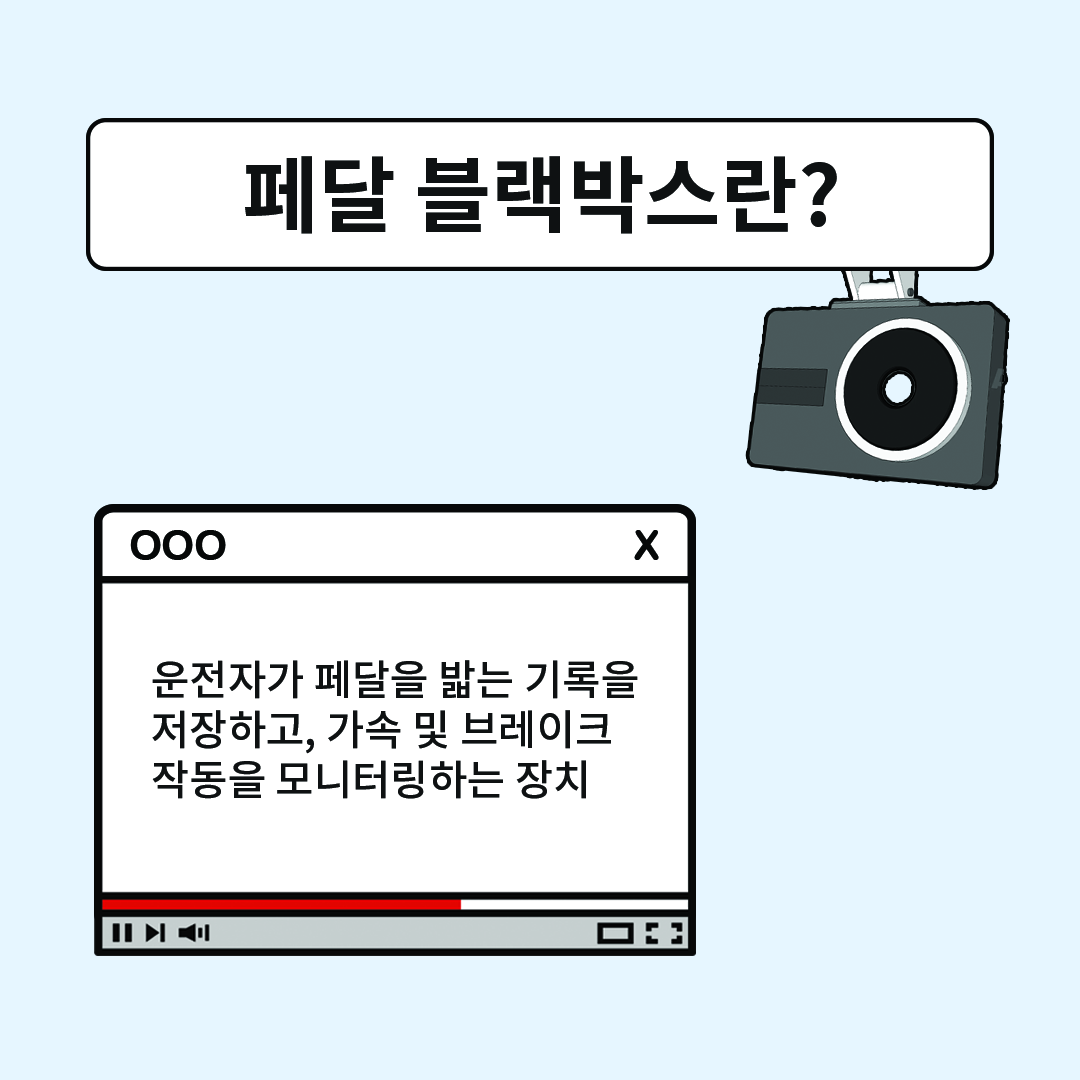
<style>
.page{position:relative;width:1080px;height:1080px;background:#e6f6ff}
.page>*{position:absolute;margin:0}
.t1{font:83.3px "NotoSansCJKkr-Bold";color:#0e1112}
.t2{font:41.7px "ArialRoundedMTBold";color:#060808}
.t3{font:41.7px "NotoSansCJKkr-Medium";color:#0e1112}
</style>
<div class="page">
<p class="t1" style="left:245px;top:156px;width:592px;height:78px">페달 블랙박스란?</p>
<p class="t2" style="left:130px;top:530px;width:529px;height:30px">OOO                                       X</p>
<p class="t3" style="left:152px;top:660px;width:486px;height:139px">운전자가 페달을 밟는 기록을 <br>저장하고, 가속 및 브레이크 <br>작동을 모니터링하는 장치</p>
</div>
